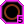
<style>
.page{position:relative;width:24px;height:24px;background:#000000}
.page>*{position:absolute;margin:0}
.t1{font:9px "Montserrat-Bold";color:#000000}
</style>
<div class="page">
<p class="t1" style="left:17px;top:16px;width:6px;height:7px">5</p>
</div>
